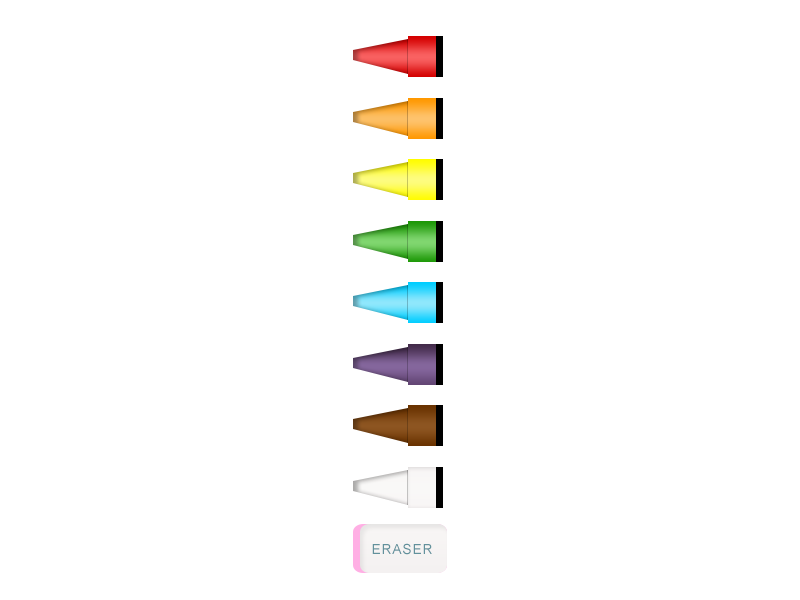
<style>
.page{position:relative;width:800px;height:600px;background:#ffffff}
.page>*{position:absolute;margin:0}
.t1{font:14px "ArialMT";letter-spacing:0.05em;color:#62919c}
</style>
<div class="page">
<p class="t1" style="left:372px;top:543px;width:60px;height:12px">ERASER</p>
</div>
